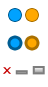
<style>
.page{position:relative;width:48px;height:87px;background:#ffffff}
.page>*{position:absolute;margin:0}
.t1{font:12px "ArialMT";color:#c50000;scale:1.38 1}
</style>
<div class="page">
<p class="t1" style="left:3px;top:67px;width:8px;height:7px">x</p>
</div>
